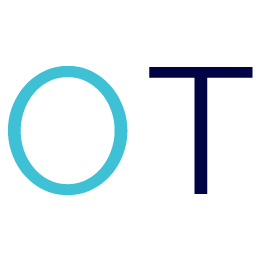
<style>
.page{position:relative;width:256px;height:256px;background:#ffffff}
.page>*{position:absolute;margin:0}
.t1{font:179px "Raleway";letter-spacing:0.06em;color:#3ec1d5}
.t2{font:179px "Raleway";letter-spacing:0.06em;color:#000444}
</style>
<div class="page">
<p class="t1" style="left:8px;top:65px;width:245px;height:130px">O<span class="t2">T</span></p>
</div>
